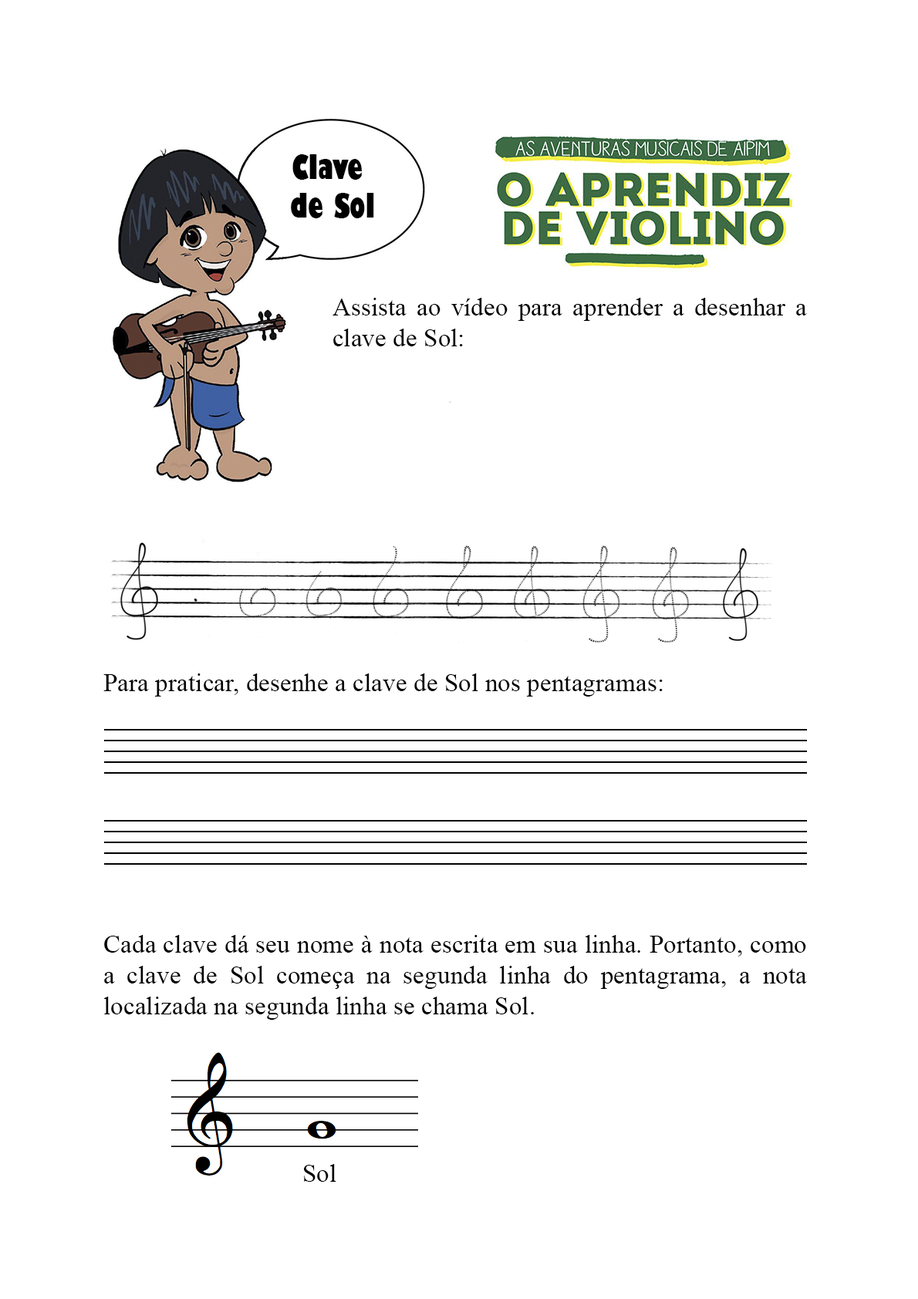
<style>
.page{position:relative;width:918px;height:1299px;background:#ffffff}
.page>*{position:absolute;margin:0}
.t1{font:32.1px "GillSans-UltraBoldCondensed";color:#000000}
.t2{font:25.7px "TimesNewRomanPSMT";color:#000000}
</style>
<div class="page">
<p class="t1" style="left:291px;top:154px;width:83px;height:64px;text-align:center">Clave <br>de Sol</p>
<p class="t2" style="left:332px;top:298px;width:475px;height:48px;text-align:justify">Assista ao vídeo para aprender a desenhar a clave de Sol:</p>
<p class="t2" style="left:103px;top:673px;width:560px;height:24px">Para praticar, desenhe a clave de Sol nos pentagramas:</p>
<p class="t2" style="left:104px;top:935px;width:703px;height:85px;text-align:justify">Cada clave dá seu nome à nota escrita em sua linha. Portanto, como a clave de Sol começa na segunda linha do pentagrama, a nota localizada na segunda linha se chama Sol.</p>
<p class="t2" style="left:304px;top:1164px;width:32px;height:18px">Sol</p>
</div>
